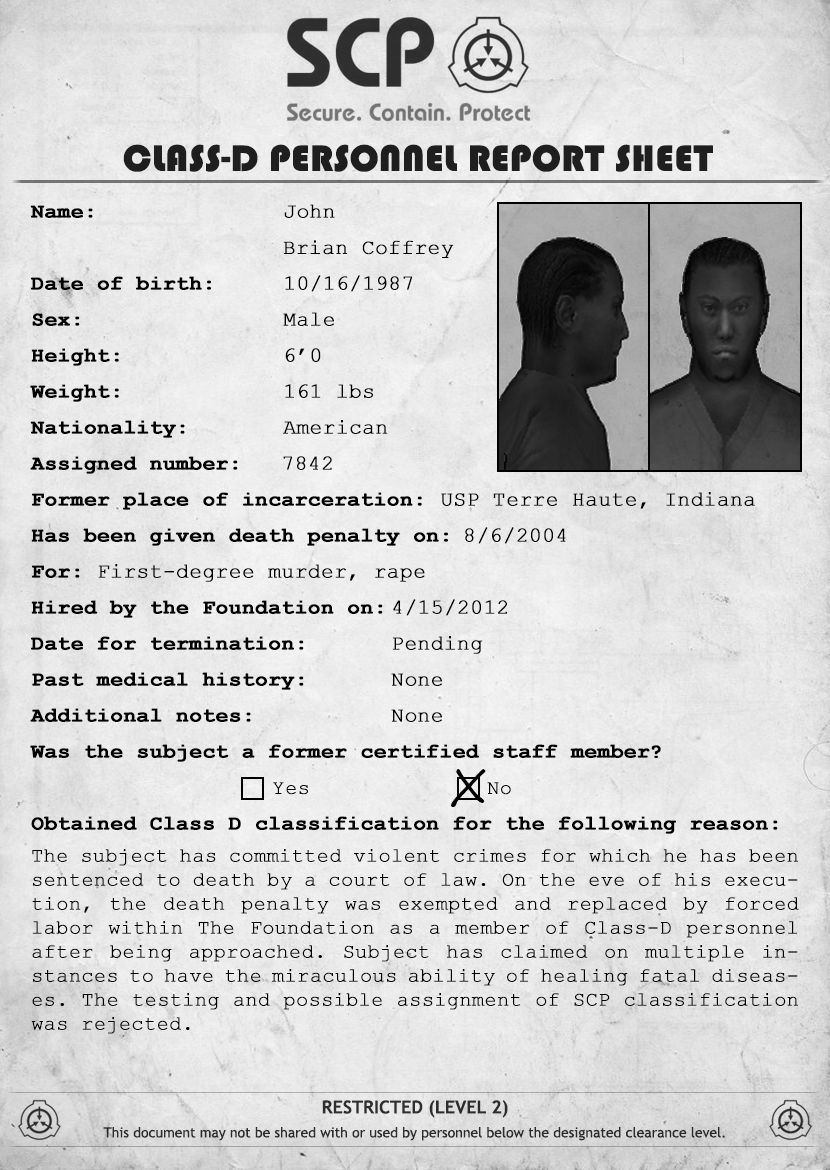
<style>
.page{position:relative;width:830px;height:1170px}
.page>*{position:absolute;margin:0}
.t1{font:38px "Bauhaus93";letter-spacing:-0.01em;color:#222121;font-weight:bold}
.t2{font:21px/36px "CourierNewPS-BoldMT";color:#000000;font-weight:bold}
.t3{font:21px/36px "CourierNewPSMT";color:#000000;font-weight:bold}
.t4{font:21px "CourierNewPSMT";color:#000000;font-weight:bold}
.t5{font:48px "SegoePrint";color:#000000}
.t6{font:20px "CourierNewPSMT";color:#000000;font-weight:bold}
.t7{font:20px/24px "CourierNewPSMT";color:#000000;font-weight:bold}
.t8{font:14px/24px "TrebuchetMS";color:#333333}
.t9{font:18px/24px "TrebuchetMS-Bold";color:#333333;text-transform:uppercase}
</style>
<div class="page">
<p class="t1" style="left:123px;top:144px;width:590px;height:28px">CLASS-D PERSONNEL REPORT SHEET</p>
<p class="t2" style="left:30px;top:204px;width:748px;height:630px;text-align:justify">Name:      <span class="t3">John<br>     <br></span>Date of birth:  <span class="t3">10/16/1987<br></span>Sex:      <span class="t3">Male<br></span>Height:     <span class="t3">6’0<br></span>Weight:<span class="t3">     161 lbs<br></span>Nationality:<span class="t3">   American<br></span>Assigned number:      <span class="t3">7842<br></span>Former place of incarceration:<span class="t3">  USP Terre Haute, Indiana<br></span>Has been given death penalty on:<span class="t3"> 8/6/2004<br></span>For:<span class="t3"> First-degree murder, rape<br></span>Hired by the Foundation on: <span class="t3">4/15/2012<br></span>Date for termination:   <span class="t3">Pending<br></span>Past medical history:   <span class="t3">None<br></span>Additional notes:    <span class="t3">None<br></span>Was the subject a former certified staff member?<br> <br>Obtained Class D classification for the following reason:</p>
<p class="t4" style="left:283px;top:240px;width:171px;height:18px">Brian Coffrey</p>
<p class="t5" style="left:451px;top:769px;width:35px;height:38px">X</p>
<p class="t6" style="left:273px;top:782px;width:35px;height:13px">Yes</p>
<p class="t6" style="left:487px;top:782px;width:24px;height:13px">No</p>
<p class="t7" style="left:31px;top:849px;width:768px;height:185px;text-align:justify">The subject has committed violent crimes for which he has been sentenced to death by a court of law. On the eve of his execution, the death penalty was exempted and replaced by forced labor within The Foundation as a member of Class-D personnel after being approached. Subject has claimed on multiple instances to have the miraculous ability of healing fatal diseases. The testing and possible assignment of SCP classification was rejected.</p>
<p class="t8" style="left:103px;top:1100px;width:622px;height:41px;text-align:center"><span class="t9">Restricted (level 2)<br></span>This document may not be shared with or used by personnel below the designated clearance level.</p>
</div>
